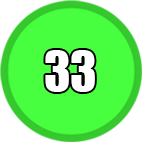
<style>
.page{position:relative;width:142px;height:142px;background:#47ff3e}
.page>*{position:absolute;margin:0}
.t1{font:50px "Impact";color:#ffffff}
</style>
<div class="page">
<p class="t1" style="left:45px;top:50px;width:50px;height:42px">33</p>
</div>
